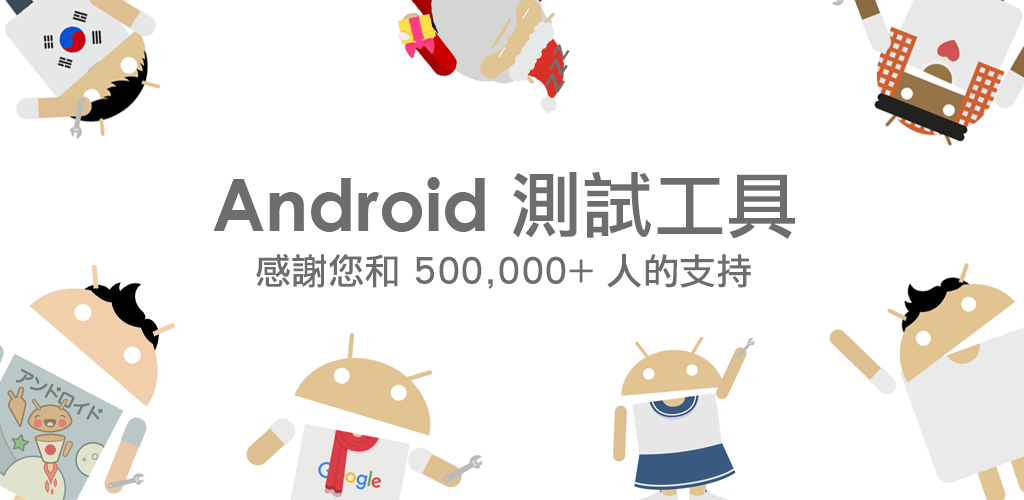
<style>
.page{position:relative;width:1024px;height:500px;background:#ffffff}
.page>*{position:absolute;margin:0}
.t1{font:72px "CenturyGothic-Bold";color:#6d6d6d}
.t2{font:72px "LiHeiPro";color:#6d6d6d}
.t3{font:36.4px "LiHeiPro";color:#6d6d6d}
</style>
<div class="page">
<p class="t1" style="left:213px;top:172px;width:582px;height:67px">Android <span class="t2">測試工具</span></p>
<p class="t3" style="left:256px;top:253px;width:495px;height:36px">感謝您和 500,000+ 人的支持</p>
</div>
